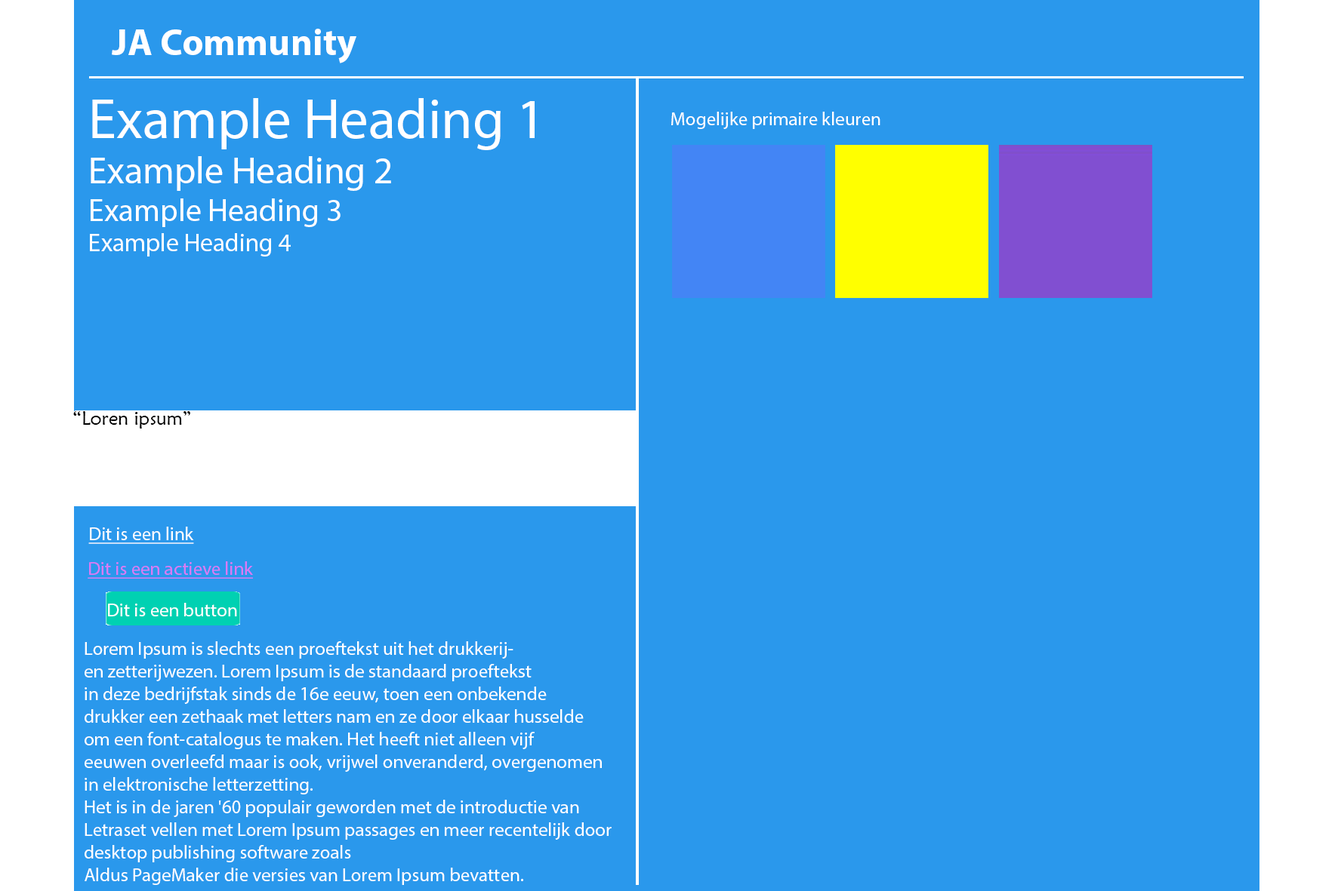
<style>
.page{position:relative;width:1338px;height:891px;background:#2a98ec}
.page>*{position:absolute;margin:0}
.t1{font:9.1px "MyriadPro-Bold";color:#ffffff}
.t2{font:56.6px "MyriadPro-Regular";color:#ffffff}
.t3{font:37.7px "MyriadPro-Regular";color:#ffffff}
.t4{font:31.5px "MyriadPro-Regular";color:#ffffff}
.t5{font:25.2px "MyriadPro-Regular";color:#ffffff}
.t6{font:18.9px "MyriadPro-Regular";color:#ffffff}
.t7{font:18.9px "MaiandraGD-Regular";color:#000000}
.t8{font:18.9px "MyriadPro-Regular";color:#ffffff;text-decoration:underline}
.t9{font:18.9px "MyriadPro-Regular";color:#db79f4;text-decoration:underline}
</style>
<div class="page">
<p class="t1" style="left:112px;top:29px;width:244px;height:34px">JA Community</p>
<p class="t2" style="left:90px;top:98px;width:444px;height:159px">Example Heading 1<br><span class="t3">Example Heading 2<br></span><span class="t4">Example Heading 3<br></span><span class="t5">Example Heading 4</span></p>
<p class="t6" style="left:671px;top:112px;width:209px;height:17px">Mogelijke primaire kleuren</p>
<p class="t7" style="left:73px;top:411px;width:117px;height:18px">“Loren ipsum”</p>
<p class="t8" style="left:88px;top:527px;width:106px;height:17px">Dit is een link</p>
<p class="t9" style="left:88px;top:562px;width:165px;height:17px">Dit is een actieve link</p>
<p class="t6" style="left:108px;top:603px;width:129px;height:14px">Dit is een button</p>
<p class="t6" style="left:85px;top:642px;width:526px;height:243px">Lorem Ipsum is slechts een proeftekst uit het drukkerij- <br>en zetterijwezen. Lorem Ipsum is de standaard proeftekst <br>in deze bedrijfstak sinds de 16e eeuw, toen een onbekende <br>drukker een zethaak met letters nam en ze door elkaar husselde <br>om een font-catalogus te maken. Het heeft niet alleen vijf <br>eeuwen overleefd maar is ook, vrijwel onveranderd, overgenomen<br>in elektronische letterzetting. <br>Het is in de jaren '60 populair geworden met de introductie van <br>Letraset vellen met Lorem Ipsum passages en meer recentelijk door <br>desktop publishing software zoals <br>Aldus PageMaker die versies van Lorem Ipsum bevatten.</p>
</div>
